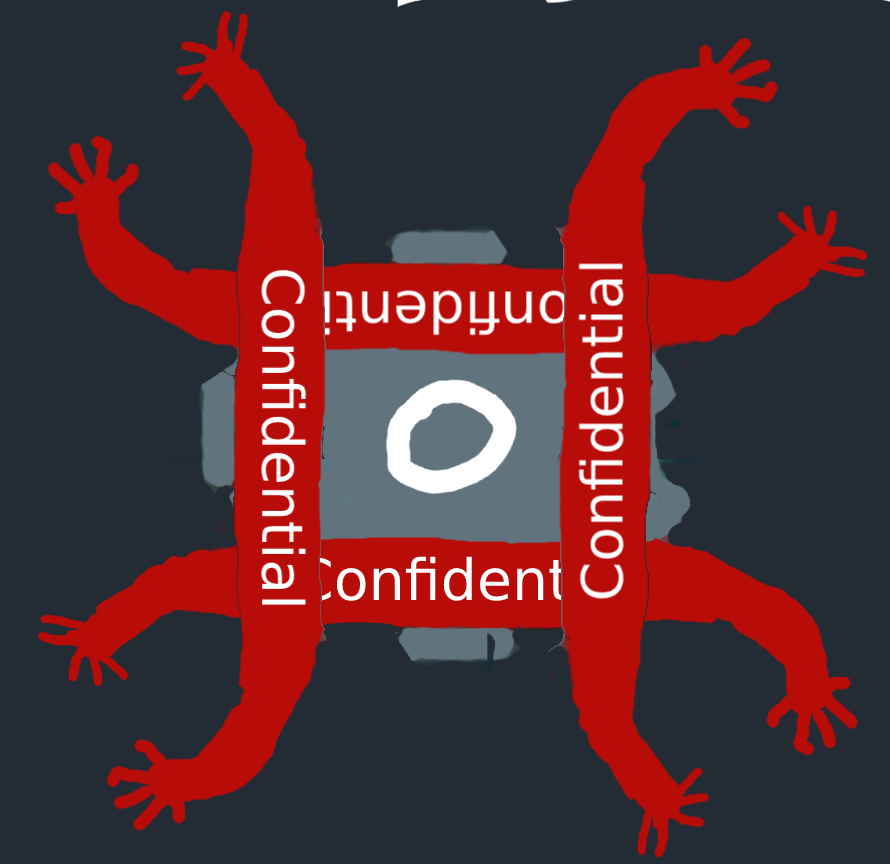
<style>
.page{position:relative;width:890px;height:864px;background:#232b34}
.page>*{position:absolute;margin:0}
.t1{font:57px "DejaVuSans";color:#ffffff}
</style>
<div class="page">
<p class="t1" style="left:297px;top:556px;width:335px;height:45px">Confidential</p>
</div>
